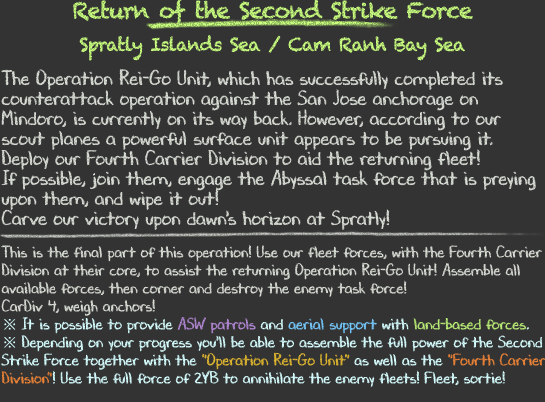
<style>
.page{position:relative;width:545px;height:402px;background:#333333}
.page>*{position:absolute;margin:0}
.t1{font:20px/20px "DJBChalkItUp";color:#d9ded6}
.t2{font:16px/18px "DJBChalkItUp";color:#d9ded6}
.t3{font:16px/18px "TimesNewRomanPSMT";color:#d7feff}
.t4{font:16px/18px "DJBChalkItUp";color:#d7feff}
.t5{font:16px/18px "DJBChalkItUp";color:#b489d6}
.t6{font:16px/18px "DJBChalkItUp";color:#76c8fb}
.t7{font:16px/18px "DJBChalkItUp";color:#bdef78}
.t8{font:16px/18px "DJBChalkItUp";color:#dfb731}
.t9{font:16px/18px "DJBChalkItUp";color:#eb8438}
</style>
<div class="page">
<p class="t1" style="left:1px;top:68px;width:545px;height:319px">The Operation Rei-Go Unit, which has successfully completed its<br>counterattack operation against the San Jose anchorage on<br>Mindoro, is currently on its way back. However, according to our<br>scout planes a powerful surface unit appears to be pursuing it.<br>Deploy our Fourth Carrier Division to aid the returning fleet!<br>If possible, join them, engage the Abyssal task force that is preying<br>upon them, and wipe it out!<br>Carve our victory upon dawn's horizon at Spratly!<br><br><span class="t2">This is the final part of this operation! Use our fleet forces, with the Fourth Carrier<br>Division at their core, to assist the returning Operation Rei-Go Unit! Assemble all<br>available forces, then corner and destroy the enemy task force!<br>CarDiv 4, weigh anchors!<br></span><span class="t3">※ </span><span class="t4">It is possible to provide </span><span class="t5">ASW patrols</span><span class="t4"> and </span><span class="t6">aerial support</span><span class="t4"> with </span><span class="t7">land-based forces</span><span class="t4">.<br></span><span class="t3">※ </span><span class="t4">Depending on your progress you'll be able to assemble the full power of the Second<br>Strike Force together with the </span><span class="t8">"Operation Rei-Go Unit"</span><span class="t4"> as well as the </span><span class="t9">"Fourth Carrier<br>Division"</span><span class="t4">! Use the full force of 2YB to annihilate the enemy fleets! Fleet, sortie!</span></p>
</div>
